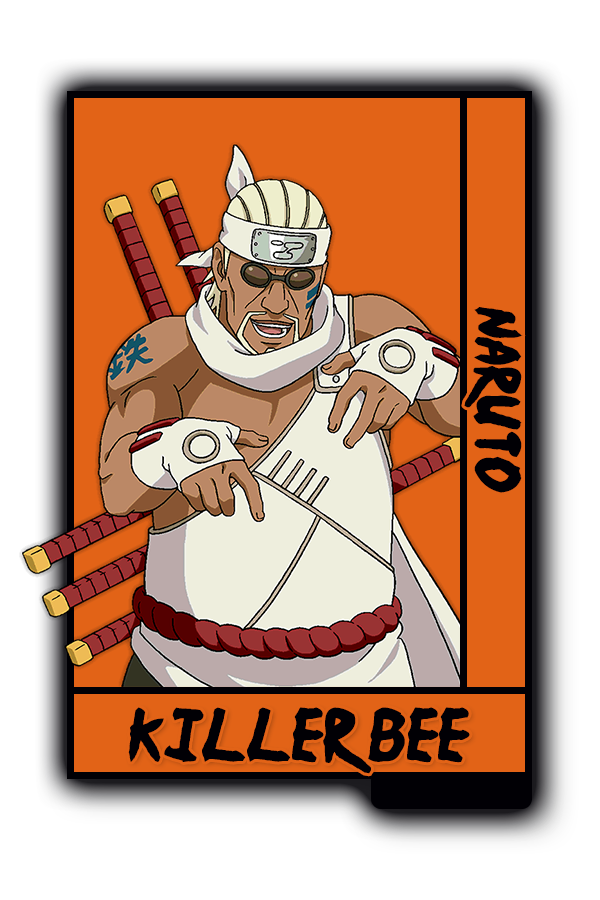
<style>
.page{position:relative;width:600px;height:900px;background:#e26317}
.page>*{position:absolute;margin:0}
.t1{font:52px "Ninja-Naruto";color:#010005}
.t2{font:60.3px "Ninja-Naruto";color:#010005}
</style>
<div class="page">
<p class="t1" style="left:464px;top:307px;width:59px;height:186px;rotate:90deg">Naruto</p>
<p class="t2" style="left:128px;top:707px;width:342px;height:67px">Killer Bee</p>
</div>
